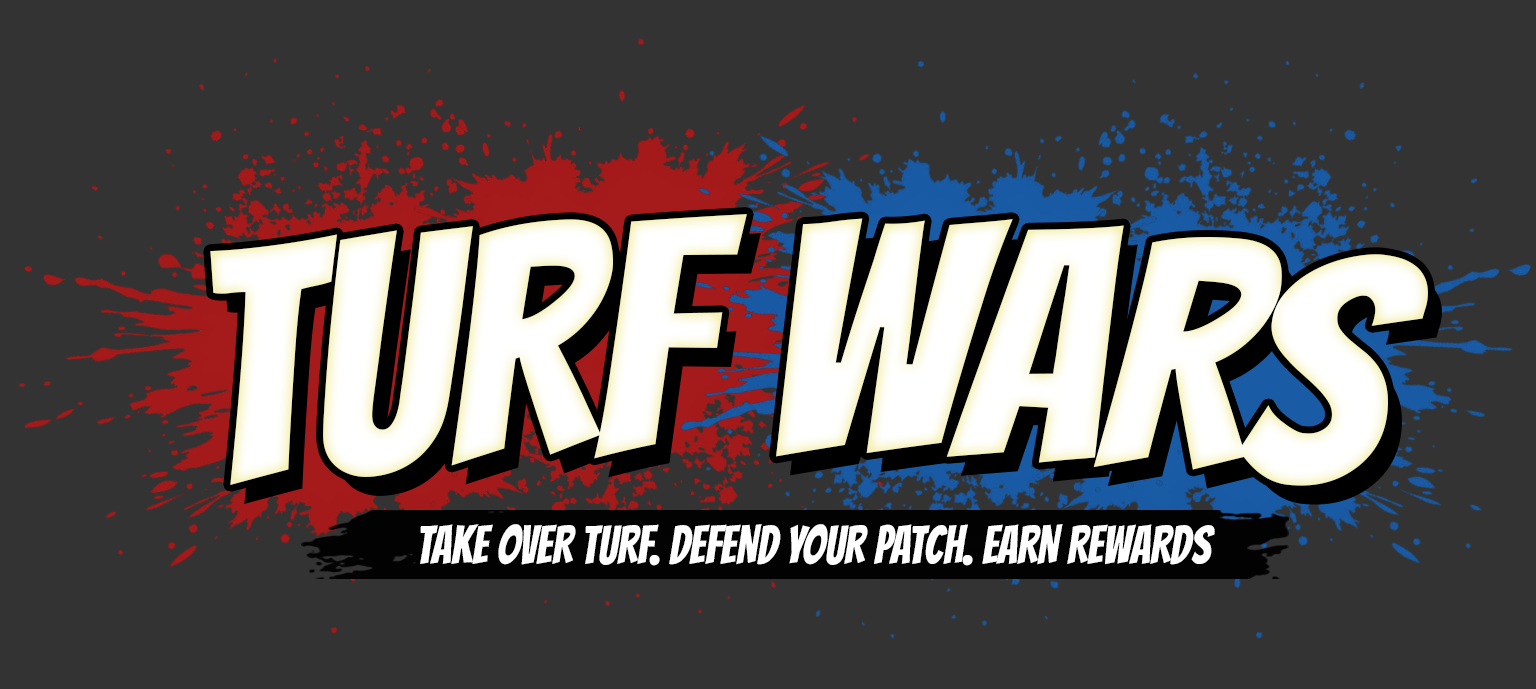
<style>
.page{position:relative;width:1536px;height:689px;background:#333333}
.page>*{position:absolute;margin:0}
.t1{font:325.9px "Bangers-Regular";letter-spacing:-0.01em;color:#ffffff;text-transform:uppercase}
.t2{font:53.3px "Bangers-Regular";color:#ffffff;text-transform:uppercase;scale:0.86 1}
</style>
<div class="page">
<p class="t1" style="left:210px;top:214px;width:1218px;height:272px">turf wars</p>
<p class="t2" style="left:420px;top:524px;width:795px;height:42px">take over turf. Defend your patch. earn rewards</p>
</div>
